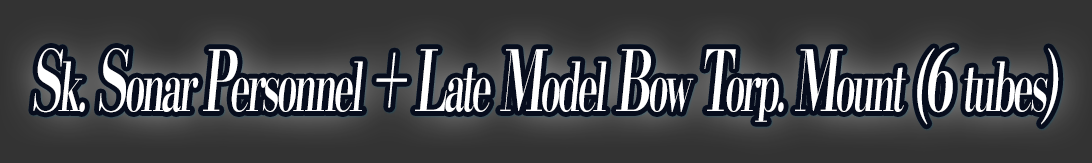
<style>
.page{position:relative;width:1092px;height:163px;background:#333333}
.page>*{position:absolute;margin:0}
.t1{font:67.2px "KochoStd-Heavy";letter-spacing:-0.08em;color:#ffffff;font-style:italic;scale:0.55 1}
.t2{font:84px "KochoStd-Heavy";letter-spacing:-0.08em;color:#ffffff;font-style:italic;scale:0.55 1}
</style>
<div class="page">
<p class="t1" style="left:33px;top:47px;width:1026px;height:78px"><span class="t2">S</span>k.<span class="t2"> S</span>onar <span class="t2">P</span>ersonnel<span class="t2"> + L</span>ate<span class="t2"> M</span>odel<span class="t2"> B</span>ow<span class="t2"> T</span>orp.<span class="t2"> M</span>ount<span class="t2"> (6 </span>tubes<span class="t2">)</span></p>
</div>
